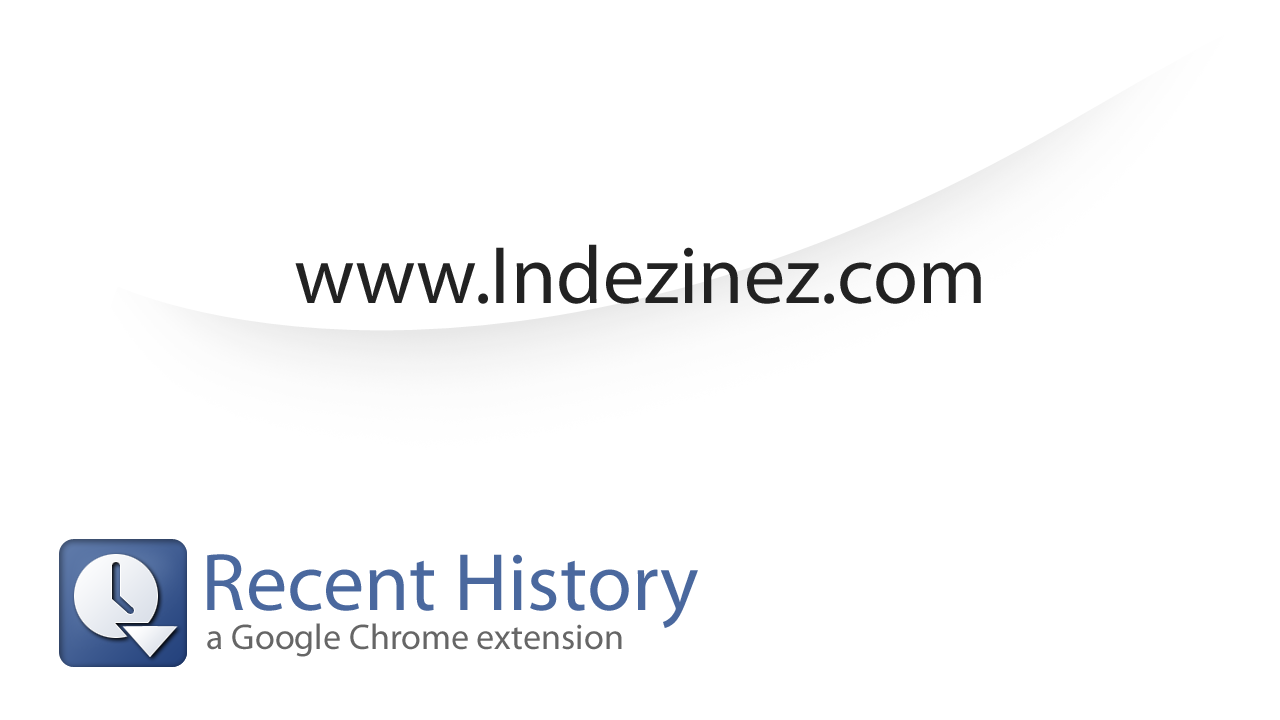
<style>
.page{position:relative;width:1280px;height:720px;background:#ffffff}
.page>*{position:absolute;margin:0}
.t1{font:82px "MyriadPro-Regular";color:#222222}
.t2{font:82px "MyriadPro-Regular";color:#4a689e}
.t3{font:36px "MyriadPro-Regular";color:#666666}
</style>
<div class="page">
<p class="t1" style="left:295px;top:244px;width:686px;height:60px">www.Indezinez.com</p>
<p class="t2" style="left:207px;top:554px;width:491px;height:74px">Recent History</p>
<p class="t3" style="left:207px;top:623px;width:415px;height:34px">a Google Chrome extension</p>
</div>
